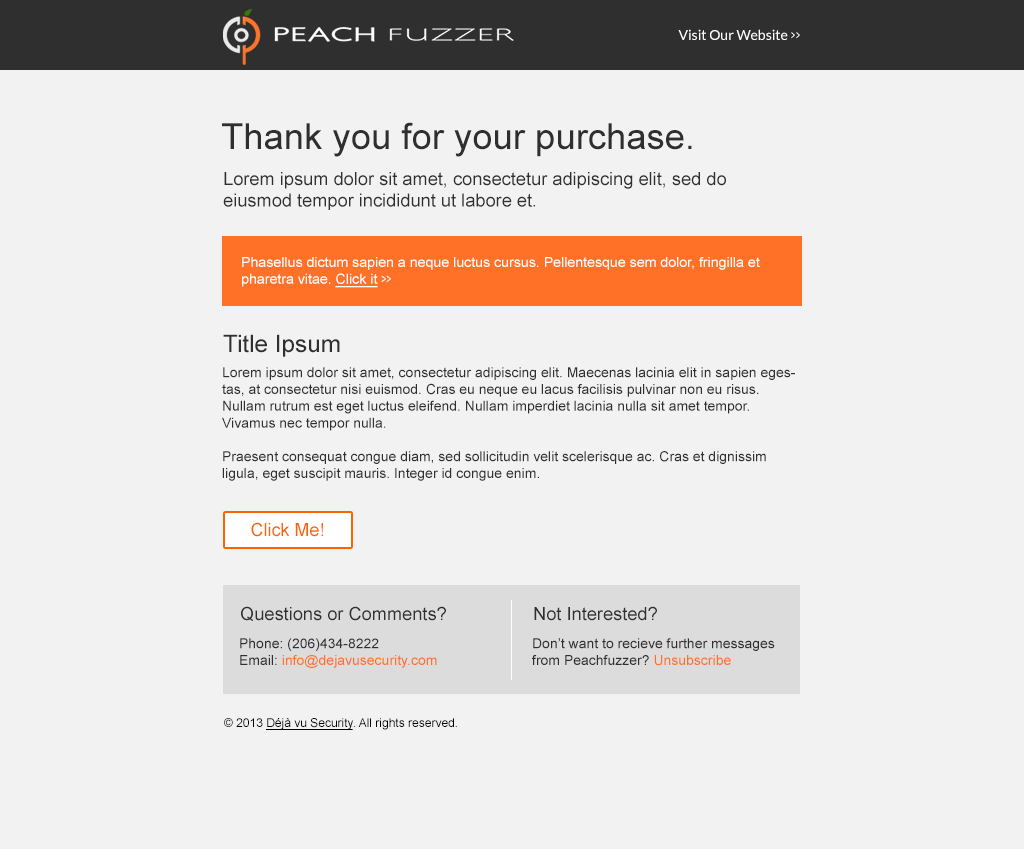
<style>
.page{position:relative;width:1024px;height:849px;background:#f2f2f2}
.page>*{position:absolute;margin:0}
.t1{font:14px "Lato-Regular";color:#ffffff}
.t2{font:14px "Lato-Regular";color:#ffffff;scale:0.6 1}
.t3{font:36px "ArialMT";color:#2f2f2f}
.t4{font:18px "ArialMT";color:#2f2f2f}
.t5{font:14px "ArialMT";color:#ffffff}
.t6{font:14px "ArialMT";color:#ffffff;scale:0.61 1}
.t7{font:14px "ArialMT";color:#ffffff;text-decoration:underline}
.t8{font:24px "ArialMT";color:#2f2f2f}
.t9{font:14px "ArialMT";color:#2f2f2f}
.t10{font:18px "ArialMT";color:#ff6300}
.t11{font:14px "ArialMT";color:#ff7127}
.t12{font:12px "ArialMT";color:#000000}
.t13{font:12px "ArialMT";color:#000000;text-decoration:underline}
</style>
<div class="page">
<p class="t1" style="left:678px;top:29px;width:122px;height:11px">Visit Our Website <span class="t2">&gt;&gt;</span></p>
<p class="t3" style="left:222px;top:122px;width:470px;height:35px">Thank you for your purchase.</p>
<p class="t4" style="left:223px;top:172px;width:503px;height:38px">Lorem ipsum dolor sit amet, consectetur adipiscing elit, sed do <br>eiusmod tempor incididunt ut labore et.</p>
<p class="t5" style="left:242px;top:257px;width:518px;height:31px">Phasellus dictum sapien a neque luctus cursus. Pellentesque sem dolor, fringilla et <span class="t6"><br></span>pharetra vitae. <span class="t7">Click it </span><span class="t6">&gt;&gt;</span></p>
<p class="t8" style="left:223px;top:334px;width:117px;height:23px">Title Ipsum</p>
<p class="t9" style="left:222px;top:367px;width:573px;height:114px">Lorem ipsum dolor sit amet, consectetur adipiscing elit. Maecenas lacinia elit in sapien egestas, at consectetur nisi euismod. Cras eu neque eu lacus facilisis pulvinar non eu risus. Nullam rutrum est eget luctus eleifend. Nullam imperdiet lacinia nulla sit amet tempor. Vivamus nec tempor nulla. <br><br>Praesent consequat congue diam, sed sollicitudin velit scelerisque ac. Cras et dignissim ligula, eget suscipit mauris. Integer id congue enim.</p>
<p class="t10" style="left:251px;top:522px;width:72px;height:15px">Click Me!</p>
<p class="t4" style="left:241px;top:606px;width:205px;height:15px">Questions or Comments?</p>
<p class="t4" style="left:534px;top:606px;width:123px;height:15px">Not Interested?</p>
<p class="t9" style="left:240px;top:638px;width:197px;height:30px">Phone: (206)434-8222<br>Email: <span class="t11">info@dejavusecurity.com</span></p>
<p class="t9" style="left:532px;top:638px;width:243px;height:28px">Don’t want to recieve further messages from Peachfuzzer? <span class="t11">Unsubscribe</span></p>
<p class="t12" style="left:224px;top:718px;width:233px;height:12px">© 2013 <span class="t13">Déjà vu Security</span>. All rights reserved.</p>
</div>
